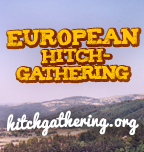
<style>
.page{position:relative;width:144px;height:152px}
.page>*{position:absolute;margin:0}
.t1{font:15.3px/17.4px "Tiza";letter-spacing:-0.09em;color:#ffc307;text-transform:uppercase;scale:0.91 1}
.t2{font:17.7px/15.2px "Tiza";letter-spacing:-0.01em;color:#ffc307;text-transform:uppercase;scale:0.91 1}
.t3{font:16.9px "Pacifico";color:#ffffff}
</style>
<div class="page">
<p class="t1" style="left:7px;top:28px;width:132px;height:53px;text-align:center;rotate:-1deg"><span class="t2">European <br></span>Hitch-<br>gathering</p>
<p class="t3" style="left:7px;top:110px;width:132px;height:26px;rotate:-1deg">hitchgathering.org</p>
</div>
